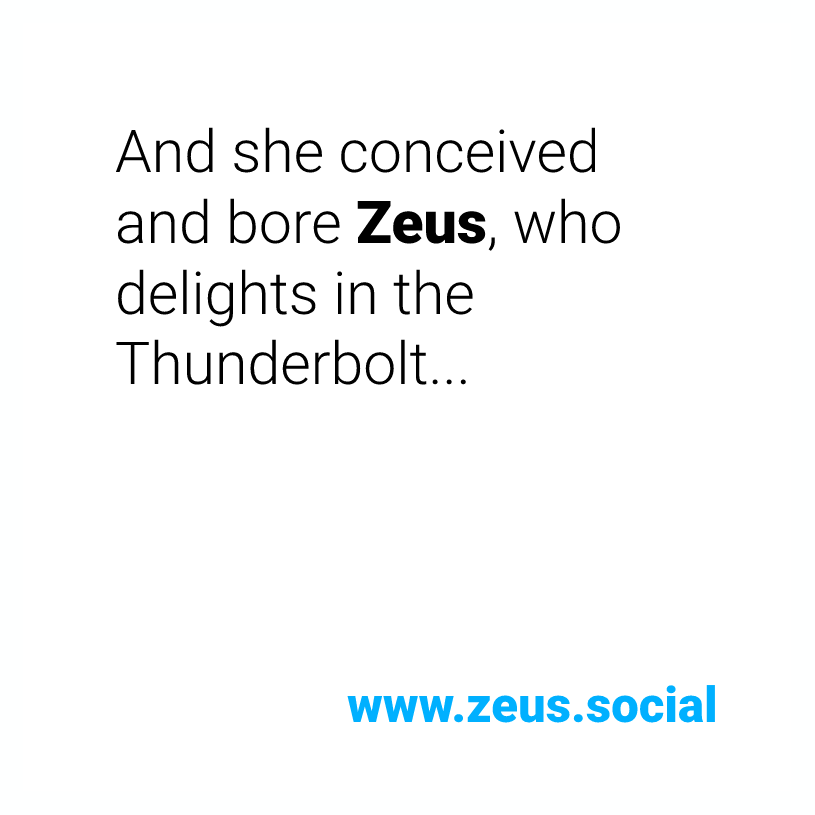
<style>
.page{position:relative;width:815px;height:815px;background:#ffffff}
.page>*{position:absolute;margin:0}
.t1{font:59px "Roboto-Light";color:#000000}
.t2{font:59px "Roboto-Black";color:#000000}
.t3{font:49.3px "Roboto-Black";color:#00b0ff}
</style>
<div class="page">
<p class="t1" style="left:115px;top:127px;width:505px;height:258px">And she conceived and bore <span class="t2">Zeus</span>, who delights in the Thunderbolt...</p>
<p class="t3" style="left:347px;top:685px;width:368px;height:38px">www.zeus.social</p>
</div>
